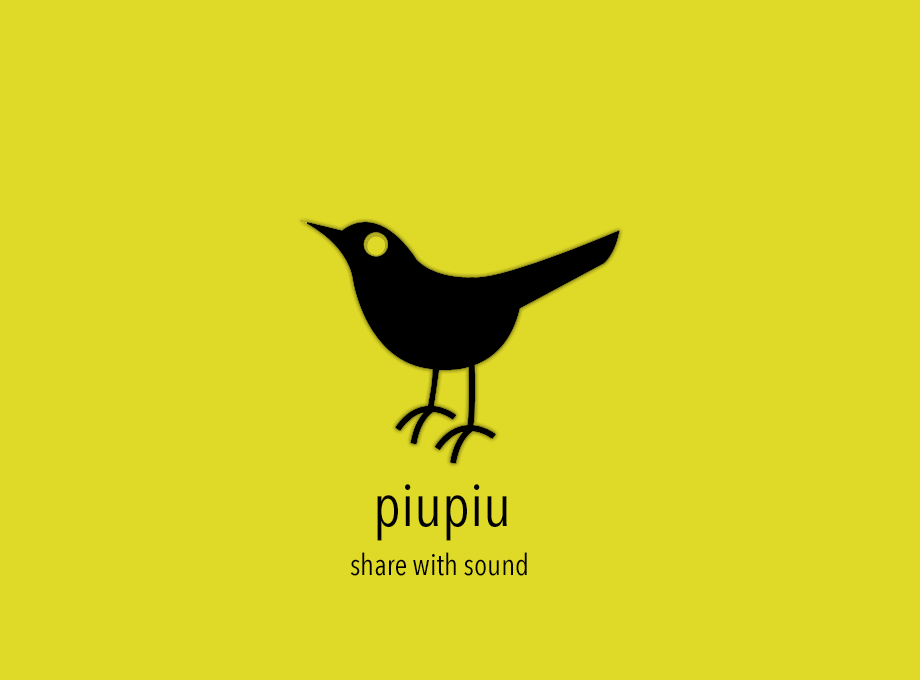
<style>
.page{position:relative;width:920px;height:680px;background:#dfd927}
.page>*{position:absolute;margin:0}
.t1{font:60px "AvenirNextCondensed-Regular";color:#000000}
.t2{font:30px "AvenirNextCondensed-Regular";color:#000000}
</style>
<div class="page">
<p class="t1" style="left:377px;top:484px;width:130px;height:57px">piupiu</p>
<p class="t2" style="left:350px;top:552px;width:177px;height:24px">share with sound</p>
</div>
